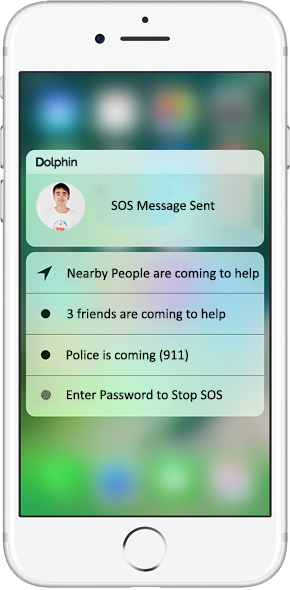
<style>
.page{position:relative;width:290px;height:590px}
.page>*{position:absolute;margin:0}
.t1{font:14px "Calibri";color:#000000}
</style>
<div class="page">
<p class="t1" style="left:111px;top:200px;width:104px;height:13px">SOS Message Sent</p>
<p class="t1" style="left:67px;top:268px;width:192px;height:13px">Nearby People are coming to help</p>
<p class="t1" style="left:67px;top:308px;width:159px;height:13px">3 friends are coming to help</p>
<p class="t1" style="left:66px;top:349px;width:122px;height:13px">Police is coming (911)</p>
<p class="t1" style="left:67px;top:389px;width:156px;height:13px">Enter Password to Stop SOS</p>
</div>
